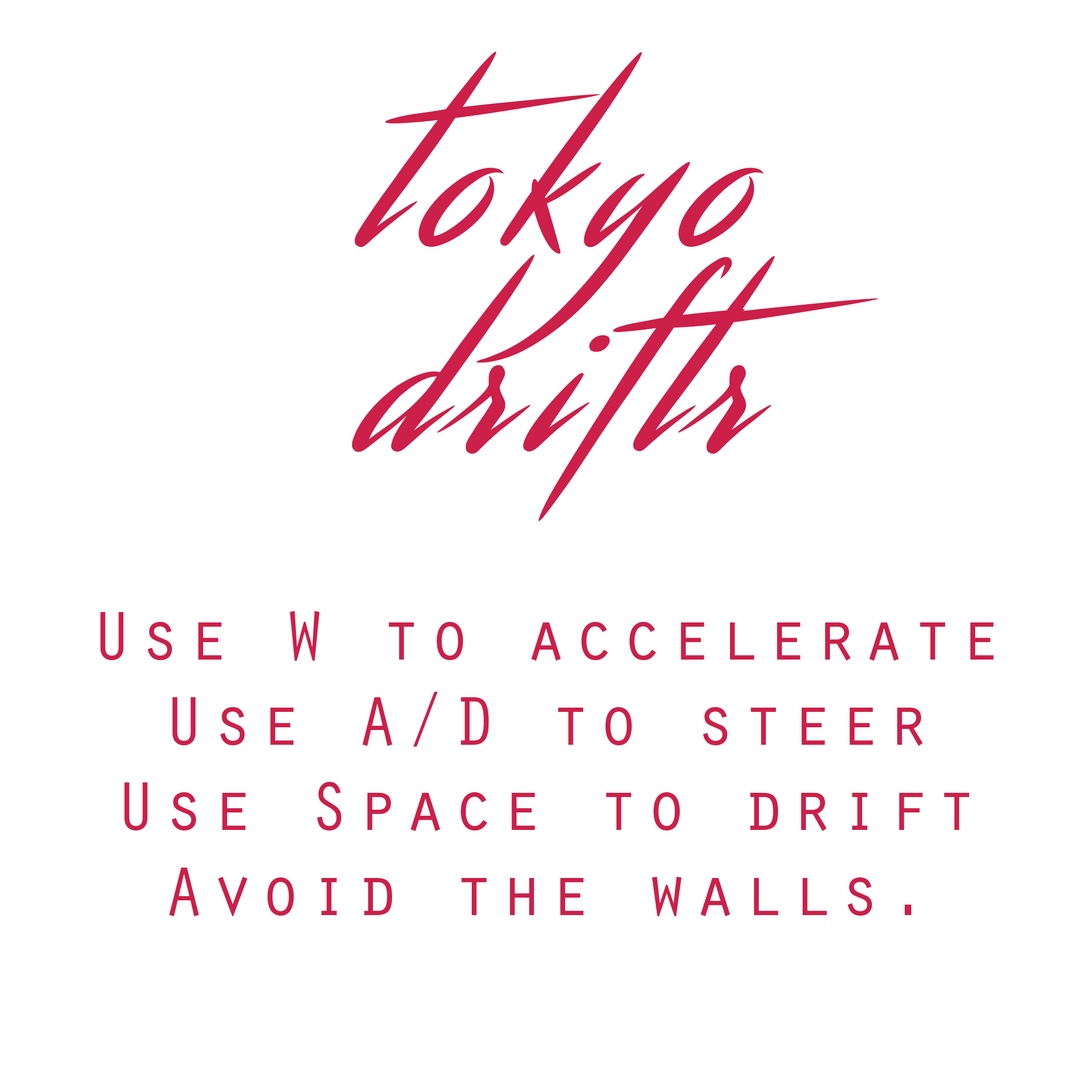
<style>
.page{position:relative;width:1092px;height:1092px;background:#ffffff}
.page>*{position:absolute;margin:0}
.t1{font:218.4px/204.2px "Streamster";letter-spacing:0.1em;color:#cc1f49}
.t2{font:71px "OratorStd";letter-spacing:0.08em;color:#cc1f49}
</style>
<div class="page">
<p class="t1" style="left:352px;top:52px;width:527px;height:469px;text-align:center">tokyo<br>driftr</p>
<p class="t2" style="left:100px;top:611px;width:894px;height:305px;text-align:center">Use W to accelerate<br>Use A/D to steer<br>Use Space to drift<br>Avoid the walls.</p>
</div>
